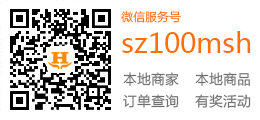
<style>
.page{position:relative;width:260px;height:120px;background:#ffffff}
.page>*{position:absolute;margin:0}
.t1{font:12px "FZLTHK--GBK1-0";color:#fe7000}
.t2{font:28px "MicrosoftYaHei";color:#fe7000}
.t3{font:14px/22px "FZLTHK--GBK1-0";color:#707070}
</style>
<div class="page">
<p class="t1" style="left:121px;top:11px;width:60px;height:12px">微信服务号</p>
<p class="t2" style="left:122px;top:31px;width:129px;height:22px">sz100msh</p>
<p class="t3" style="left:123px;top:72px;width:56px;height:36px">本地商家<br>订单查询</p>
<p class="t3" style="left:195px;top:72px;width:56px;height:36px">本地商品<br>有奖活动</p>
</div>
